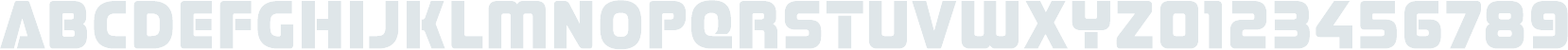
<style>
.page{position:relative;width:1568px;height:50px;background:#dfe6e9}
.page>*{position:absolute;margin:0}
.t1{font:68.1px "Stormfaze-Regular";color:#dfe6e9}
</style>
<div class="page">
<p class="t1" style="left:0px;top:0px;width:1568px;height:50px">Abcdefghijklmnopqrstuvwxyz0123456789</p>
</div>
